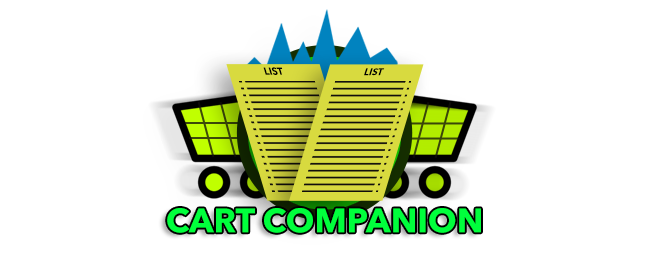
<style>
.page{position:relative;width:648px;height:258px;background:#ffffff}
.page>*{position:absolute;margin:0}
.t1{font:33.7px "AvenirNextLTPro-Bold";color:#00ff3c;text-transform:uppercase}
</style>
<div class="page">
<p class="t1" style="left:167px;top:208px;width:314px;height:25px">CART Companion</p>
</div>
